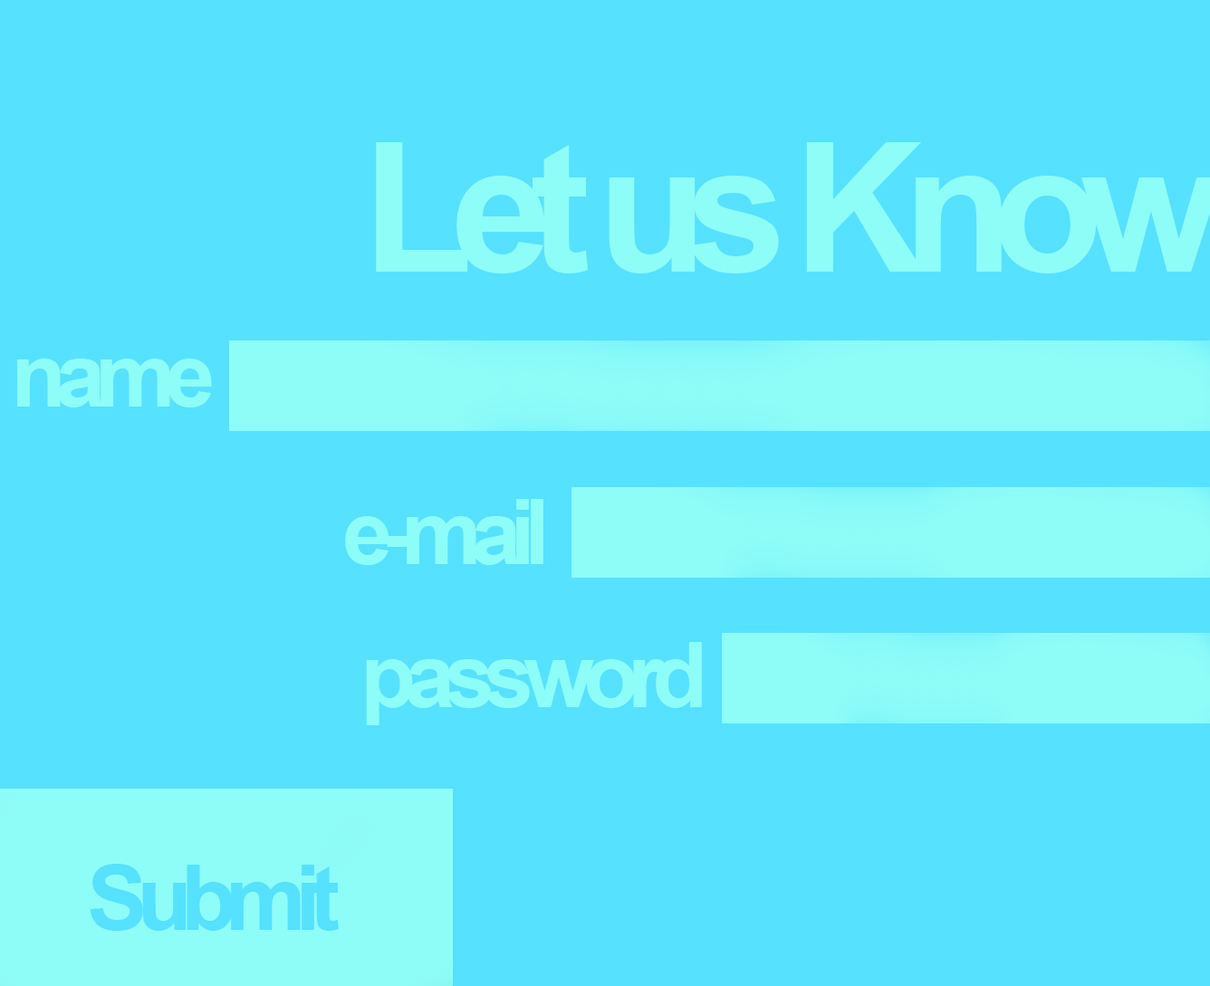
<style>
.page{position:relative;width:1210px;height:986px;background:#56e1ff}
.page>*{position:absolute;margin:0}
.t1{font:90.5px "Arial-BoldMT";letter-spacing:-0.12em;color:#8efcf7}
.t2{font:90.5px "Arial-BoldMT";letter-spacing:-0.12em;color:#56e1ff}
</style>
<div class="page">
<p class="t1" style="left:17px;top:359px;width:195px;height:48px">name</p>
<p class="t1" style="left:345px;top:499px;width:198px;height:66px">e-mail</p>
<p class="t1" style="left:366px;top:642px;width:336px;height:83px">password</p>
<p class="t2" style="left:90px;top:864px;width:249px;height:67px">Submit</p>
</div>
